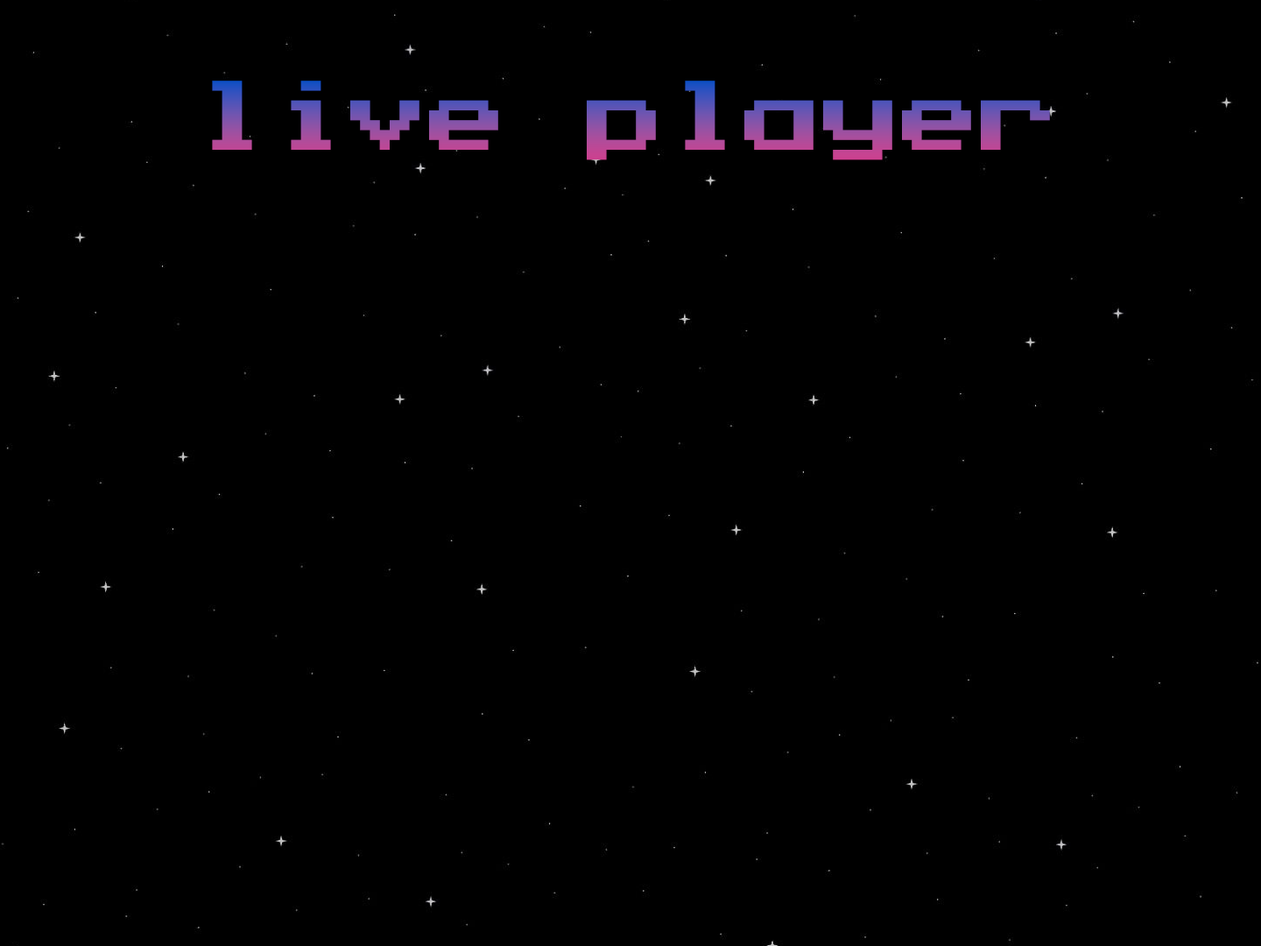
<style>
.page{position:relative;width:1261px;height:946px;background:#000000}
.page>*{position:absolute;margin:0}
.t1{font:78.8px "PressStartK"}
</style>
<div class="page">
<p class="t1" style="left:212px;top:81px;width:838px;height:79px">live player</p>
</div>
